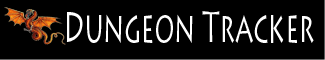
<style>
.page{position:relative;width:325px;height:60px;background:#000000}
.page>*{position:absolute;margin:0}
.t1{font:42.9px "LithosPro-Regular";color:#ffffff;scale:0.6 1}
</style>
<div class="page">
<p class="t1" style="left:66px;top:11px;width:248px;height:32px">Dungeon Tracker</p>
</div>
